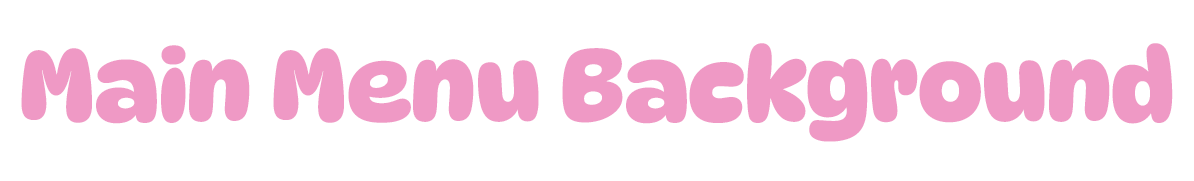
<style>
.page{position:relative;width:1194px;height:181px;background:#ffffff}
.page>*{position:absolute;margin:0}
.t1{font:100px "DynaPuff-Bold";color:#ef99c5}
</style>
<div class="page">
<p class="t1" style="left:21px;top:43px;width:1152px;height:99px">Main Menu Background</p>
</div>
